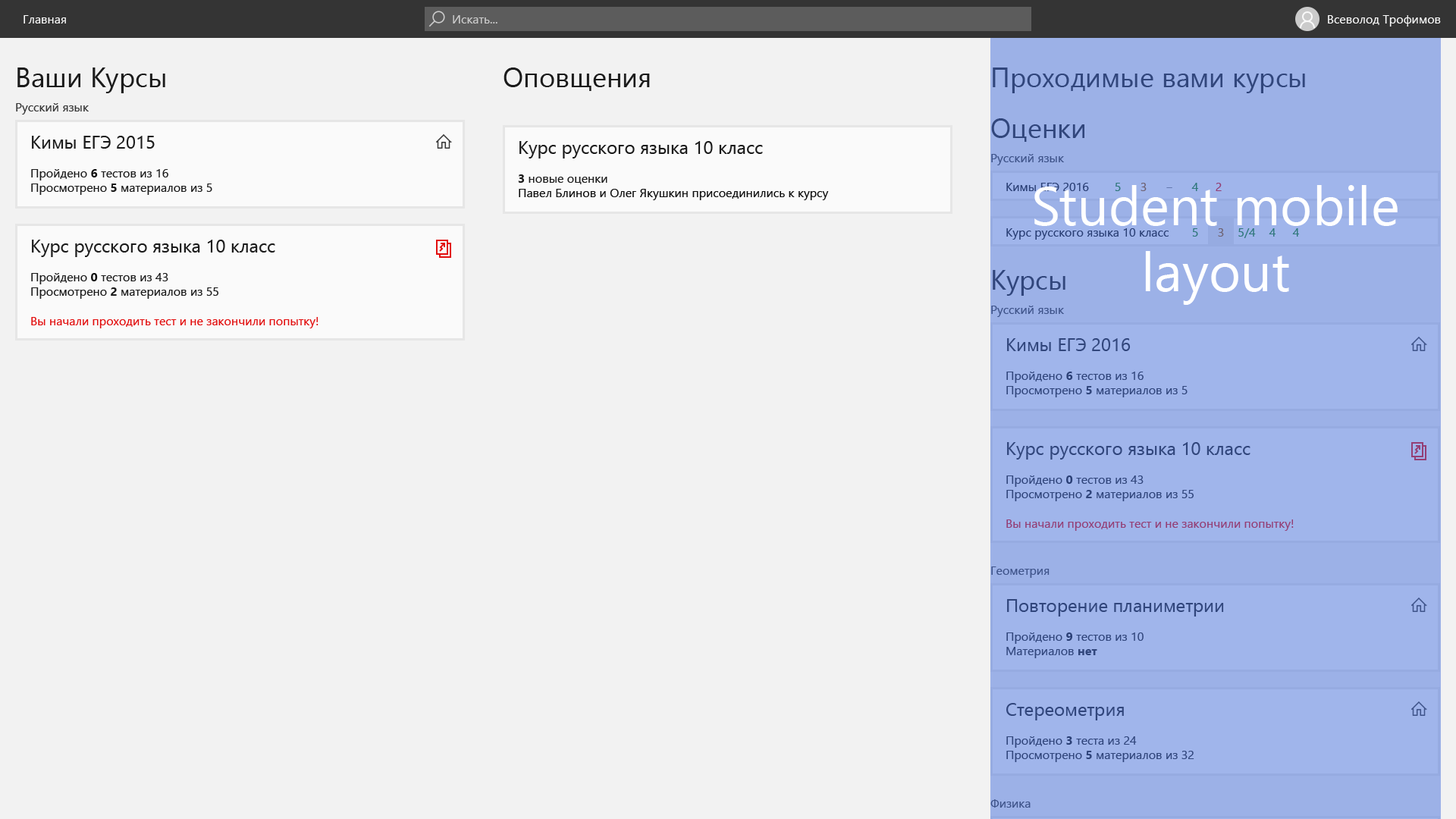
<style>
.page{position:relative;width:1456px;height:819px;background:#f2f2f2}
.page>*{position:absolute;margin:0}
.t1{font:12.1px "SegoeUI";color:#fafafa}
.t2{font:12.1px "SegoeUI";color:#cbcbcb}
.t3{font:27.3px "SegoeUI";color:#1b1b1b}
.t4{font:27.3px "SegoeUI";color:#31467c}
.t5{font:12.1px "SegoeUI";color:#373737}
.t6{font:12.1px "SegoeUI";color:#1b1b1b}
.t7{font:18.2px "SegoeUI";color:#1b1b1b}
.t8{font:12.1px "SegoeUI-Bold";color:#0f0f0f}
.t9{font:12.1px "SegoeUI-Bold";color:#1b1b1b}
.t10{font:12.1px "SegoeUI";color:#0f0f0f}
.t11{font:12.1px "SegoeUI";color:#3f548a}
.t12{font:12.1px "SegoeUI";color:#2b4076}
.t13{font:54.6px "SegoeUI";color:#ffffff}
.t14{font:12.1px "SegoeUI";color:#30787b}
.t15{font:12.1px "SegoeUI";color:#6e6271}
.t16{font:12.1px "SegoeUI";color:#943f75}
.t17{font:12.1px "SegoeUI";color:#6378ae}
.t18{font:12.1px "SegoeUI";color:#e20e0e}
.t19{font:12.1px "SegoeUI";color:#31467c}
.t20{font:18.2px "SegoeUI";color:#31467c}
.t21{font:12.1px "SegoeUI-Bold";color:#31467c}
</style>
<div class="page">
<p class="t1" style="left:24px;top:15px;width:42px;height:9px">Главная</p>
<p class="t2" style="left:453px;top:15px;width:44px;height:9px">Искать...</p>
<p class="t1" style="left:1328px;top:15px;width:113px;height:12px">Всеволод Трофимов</p>
<p class="t3" style="left:17px;top:67px;width:148px;height:26px">Ваши Курсы</p>
<p class="t3" style="left:504px;top:67px;width:146px;height:24px">Оповщения</p>
<p class="t4" style="left:993px;top:67px;width:312px;height:26px">Проходимые вами курсы</p>
<p class="t5" style="left:16px;top:103px;width:73px;height:12px">Русский язык</p>
<p class="t4" style="left:991px;top:118px;width:93px;height:24px">Оценки</p>
<p class="t6" style="left:31px;top:136px;width:181px;height:59px"><span class="t7">Кимы ЕГЭ 2015<br></span><br>Пройдено <span class="t8">6</span> тестов из 16<br>Просмотрено <span class="t9">5</span> материалов из 5</p>
<p class="t10" style="left:518px;top:141px;width:311px;height:59px"><span class="t7">Курс русского языка 10 класс<br><br></span><span class="t9">3</span><span class="t6"> новые оценки<br></span>Павел Блинов и Олег Якушкин присоединились к курсу</p>
<p class="t11" style="left:991px;top:154px;width:73px;height:11px">Русский язык</p>
<p class="t12" style="left:1006px;top:183px;width:83px;height:8px">Кимы ЕГЭ 2016</p>
<p class="t13" style="left:1034px;top:185px;width:364px;height:120px;text-align:center">Student mobile layout</p>
<p class="t14" style="left:1115px;top:183px;width:6px;height:8px">5</p>
<p class="t15" style="left:1141px;top:183px;width:6px;height:8px">3</p>
<p class="t14" style="left:1191px;top:183px;width:7px;height:8px">4</p>
<p class="t16" style="left:1216px;top:183px;width:6px;height:8px">2</p>
<p class="t17" style="left:1166px;top:187px;width:6px;height:1px">‒</p>
<p class="t12" style="left:1006px;top:228px;width:163px;height:12px">Курс русского языка 10 класс</p>
<p class="t14" style="left:1192px;top:228px;width:6px;height:9px">5</p>
<p class="t15" style="left:1218px;top:228px;width:6px;height:9px">3</p>
<p class="t14" style="left:1238px;top:228px;width:18px;height:10px">5/4</p>
<p class="t14" style="left:1269px;top:228px;width:6px;height:9px">4</p>
<p class="t14" style="left:1292px;top:228px;width:7px;height:9px">4</p>
<p class="t18" style="left:31px;top:240px;width:287px;height:88px"><span class="t7">Курс русского языка 10 класс<br></span><span class="t6"><br>Пройдено </span><span class="t8">0</span><span class="t6"> тестов из 43<br>Просмотрено </span><span class="t9">2</span><span class="t6"> материалов из 55<br><br></span>Вы начали проходить тест и не закончили попытку!</p>
<p class="t4" style="left:993px;top:270px;width:72px;height:26px">Курсы</p>
<p class="t11" style="left:991px;top:306px;width:73px;height:11px">Русский язык</p>
<p class="t19" style="left:1006px;top:338px;width:182px;height:59px"><span class="t20">Кимы ЕГЭ 2016<br></span><br>Пройдено <span class="t21">6</span> тестов из 16<br>Просмотрено <span class="t21">5</span> материалов из 5</p>
<p class="t19" style="left:1006px;top:442px;width:288px;height:89px"><span class="t20">Курс русского языка 10 класс<br></span><br>Пройдено <span class="t21">0</span> тестов из 43<br>Просмотрено <span class="t21">2</span> материалов из 55<br><br>Вы начали проходить тест и не закончили попытку!</p>
<p class="t11" style="left:991px;top:566px;width:59px;height:12px">Геометрия</p>
<p class="t19" style="left:1006px;top:599px;width:218px;height:59px"><span class="t20">Повторение планиметрии<br></span><br>Пройдено <span class="t21">9</span> тестов из 10<br>Материалов <span class="t21">нет</span></p>
<p class="t19" style="left:1006px;top:703px;width:188px;height:59px"><span class="t20">Стереометрия<br></span><br>Пройдено <span class="t21">3</span> теста из 24<br>Просмотрено <span class="t21">5</span> материалов из 32</p>
<p class="t11" style="left:990px;top:799px;width:41px;height:9px">Физика</p>
</div>
